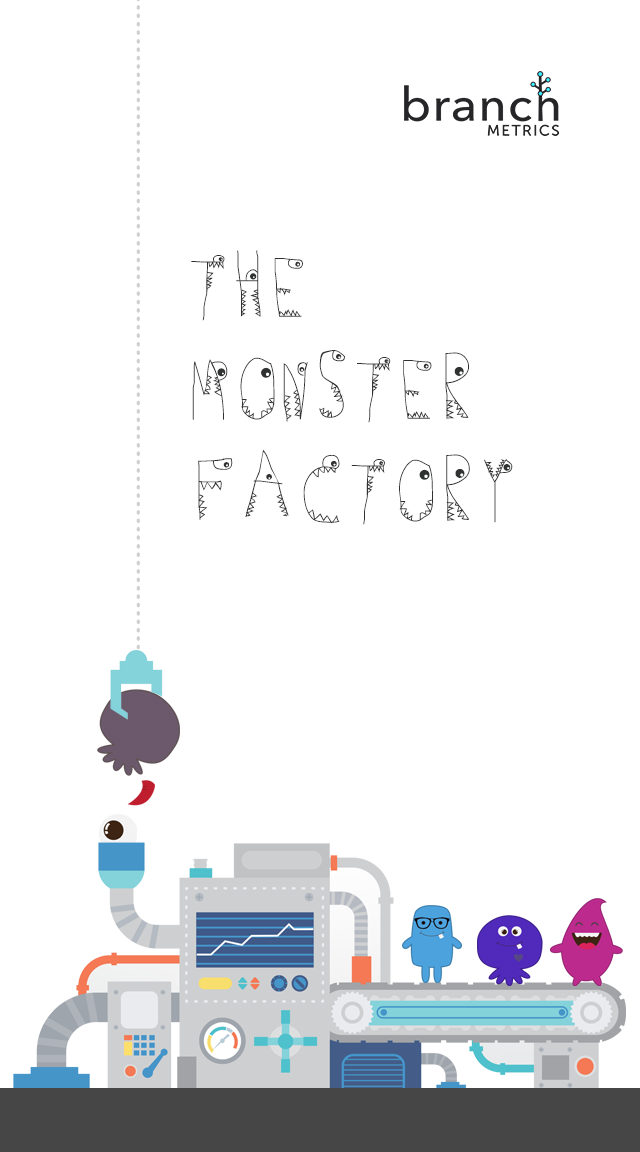
<style>
.page{position:relative;width:640px;height:1152px;background:#ffffff}
.page>*{position:absolute;margin:0}
.t1{font:96px/96px "Germs";letter-spacing:0.075em;color:#303131;font-variant:small-caps}
</style>
<div class="page">
<p class="t1" style="left:191px;top:250px;width:322px;height:275px">THE<br>MONSTER<br>FACTORY</p>
</div>
